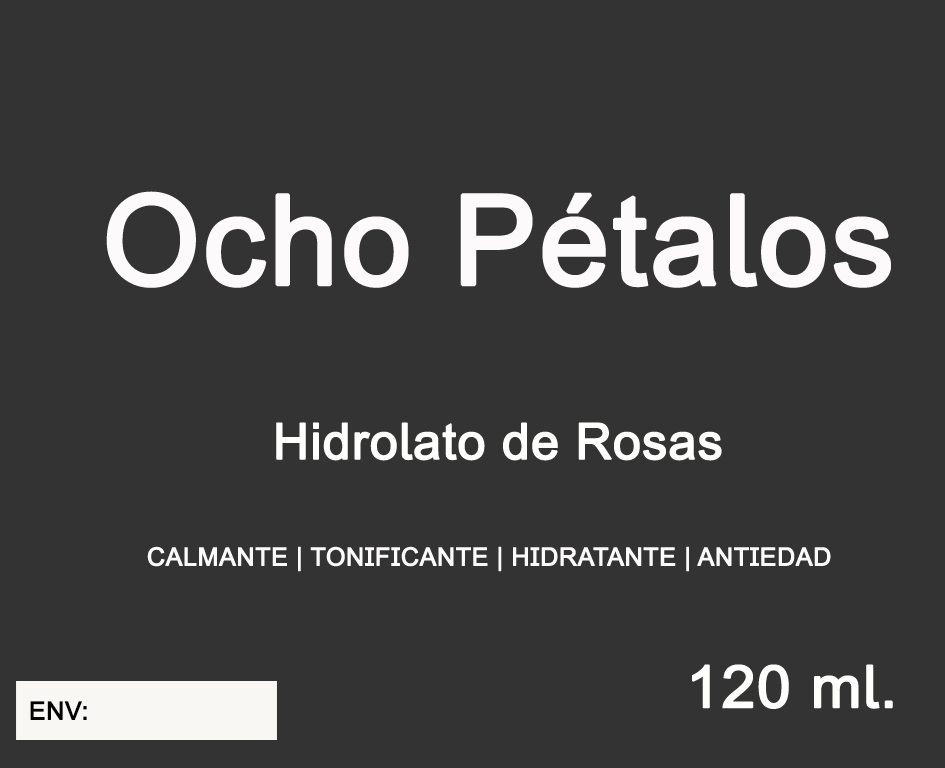
<style>
.page{position:relative;width:945px;height:768px;background:#333333}
.page>*{position:absolute;margin:0}
.t1{font:125px "ArialMT";color:#fcfafa;font-weight:bold}
.t2{font:50px "ArialMT";color:#fffffe;font-weight:bold}
.t3{font:25px "ArialMT";color:#fcfafa;font-weight:bold}
.t4{font:58.5px "ArialMT";color:#fffffe;font-weight:bold;scale:1.04 1}
.t5{font:35.1px "ArialMT";color:#fffffe;font-weight:bold;scale:1.04 1}
.t6{font:25px "ArialMT";color:#010100;font-weight:bold}
</style>
<div class="page">
<p class="t1" style="left:106px;top:191px;width:785px;height:97px">Ocho Pétalos</p>
<p class="t2" style="left:276px;top:422px;width:446px;height:39px">Hidrolato de Rosas</p>
<p class="t3" style="left:147px;top:546px;width:684px;height:26px">CALMANTE | TONIFICANTE | HIDRATANTE | ANTIEDAD</p>
<p class="t4" style="left:692px;top:664px;width:201px;height:45px"><span class="t5"><br></span>120 ml.</p>
<p class="t6" style="left:30px;top:701px;width:57px;height:19px">ENV:</p>
</div>
